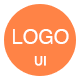
<style>
.page{position:relative;width:80px;height:80px;background:#ff8346}
.page>*{position:absolute;margin:0}
.t1{font:20px "Helvetica";color:#ffffff}
.t2{font:12px "Helvetica";color:#ffffff;font-weight:bold}
</style>
<div class="page">
<p class="t1" style="left:13px;top:29px;width:56px;height:15px">LOGO</p>
<p class="t2" style="left:34px;top:56px;width:12px;height:10px">UI</p>
</div>
